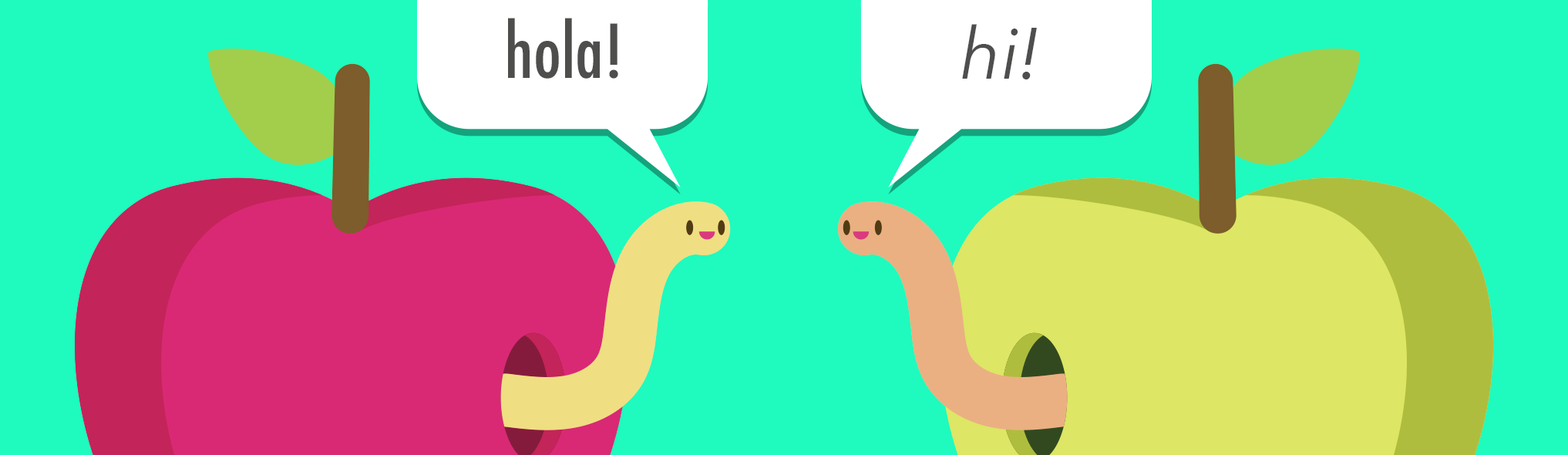
<style>
.page{position:relative;width:1568px;height:455px;background:#1ffabe}
.page>*{position:absolute;margin:0}
.t1{font:72px "Futura-CondensedMedium";color:#4e4e4d}
.t2{font:72px "AvenirNext-Italic";color:#4e4e4d}
</style>
<div class="page">
<p class="t1" style="left:508px;top:18px;width:110px;height:61px">hola!</p>
<p class="t2" style="left:962px;top:24px;width:75px;height:55px">hi!</p>
</div>
